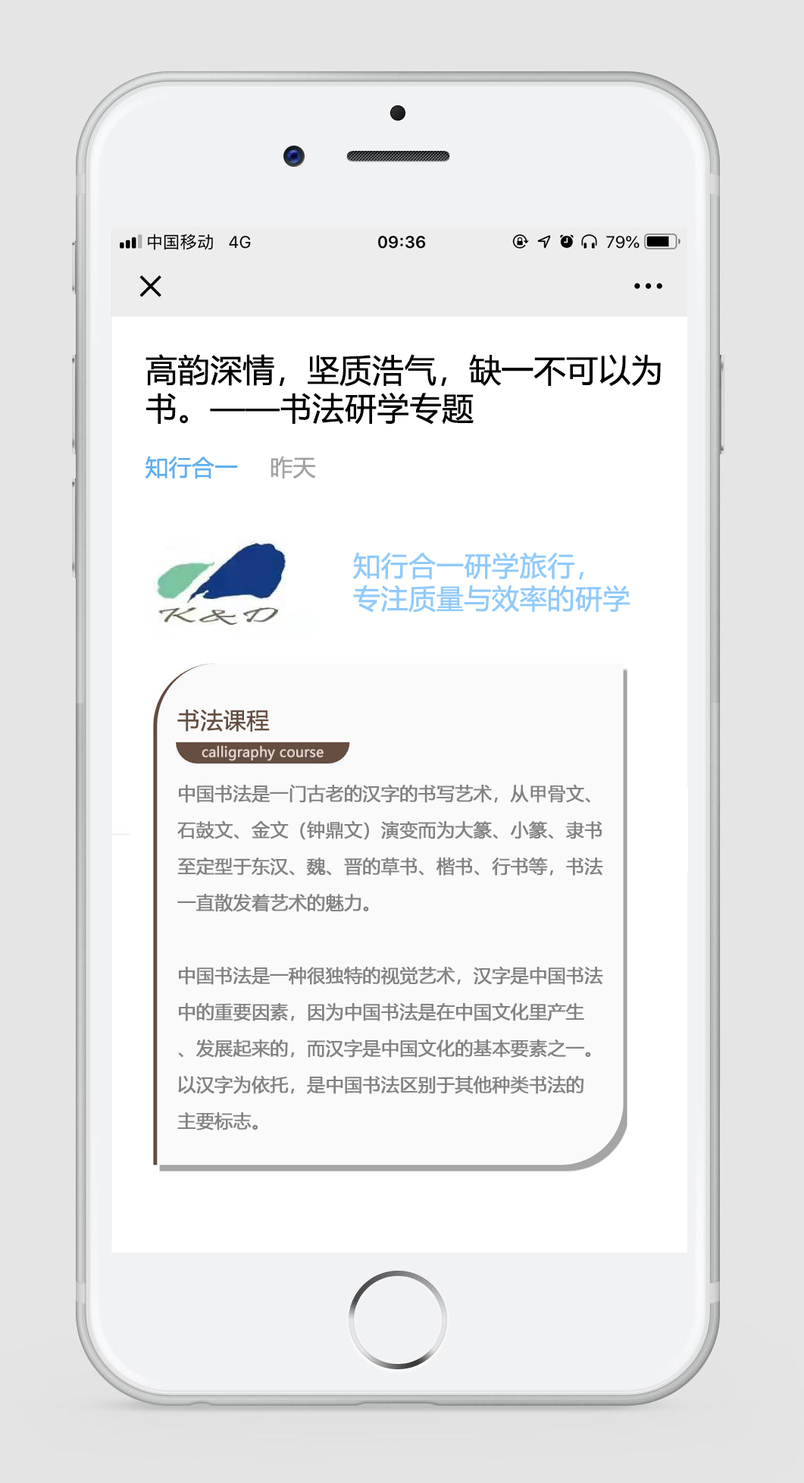
<style>
.page{position:relative;width:804px;height:1483px;background:#ffffff}
.page>*{position:absolute;margin:0}
.t1{font:31.8px "MicrosoftYaHei";letter-spacing:-0.01em;color:#000000;font-weight:bold}
.t2{font:22.7px "MicrosoftYaHei";letter-spacing:-0.01em;color:#5eaef0;font-weight:bold}
.t3{font:22.7px "MicrosoftYaHei";letter-spacing:-0.01em;color:#a2a2a2;font-weight:bold}
.t4{font:27.3px "MicrosoftYaHei";letter-spacing:-0.01em;color:#90cafa;font-weight:bold}
.t5{font:22.7px "MicrosoftYaHei";letter-spacing:-0.01em;color:#654f42;font-weight:bold}
.t6{font:13.6px "MicrosoftYaHei";letter-spacing:-0.01em;color:#e3d2cb;font-weight:bold}
.t7{font:18.2px/36.4px "MicrosoftYaHei";letter-spacing:-0.01em;color:#828282;font-weight:bold}
</style>
<div class="page">
<p class="t1" style="left:146px;top:354px;width:515px;height:70px">高韵深情，坚质浩气，缺一不可以为<br>书。——书法研学专题</p>
<p class="t2" style="left:145px;top:456px;width:93px;height:23px">知行合一</p>
<p class="t3" style="left:271px;top:456px;width:45px;height:23px">昨天</p>
<p class="t4" style="left:353px;top:552px;width:277px;height:60px">知行合一研学旅行，<br>专注质量与效率的研学</p>
<p class="t5" style="left:177px;top:709px;width:93px;height:22px">书法课程</p>
<p class="t6" style="left:202px;top:745px;width:122px;height:16px">calligraphy course</p>
<p class="t7" style="left:177px;top:784px;width:426px;height:346px">中国书法是一门古老的汉字的书写艺术，从甲骨文、<br>石鼓文、金文（钟鼎文）演变而为大篆、小篆、隶书<br>至定型于东汉、魏、晋的草书、楷书、行书等，书法<br>一直散发着艺术的魅力。<br><br>中国书法是一种很独特的视觉艺术，汉字是中国书法<br>中的重要因素，因为中国书法是在中国文化里产生<br>、发展起来的，而汉字是中国文化的基本要素之一。<br>以汉字为依托，是中国书法区别于其他种类书法的<br>主要标志。</p>
</div>
